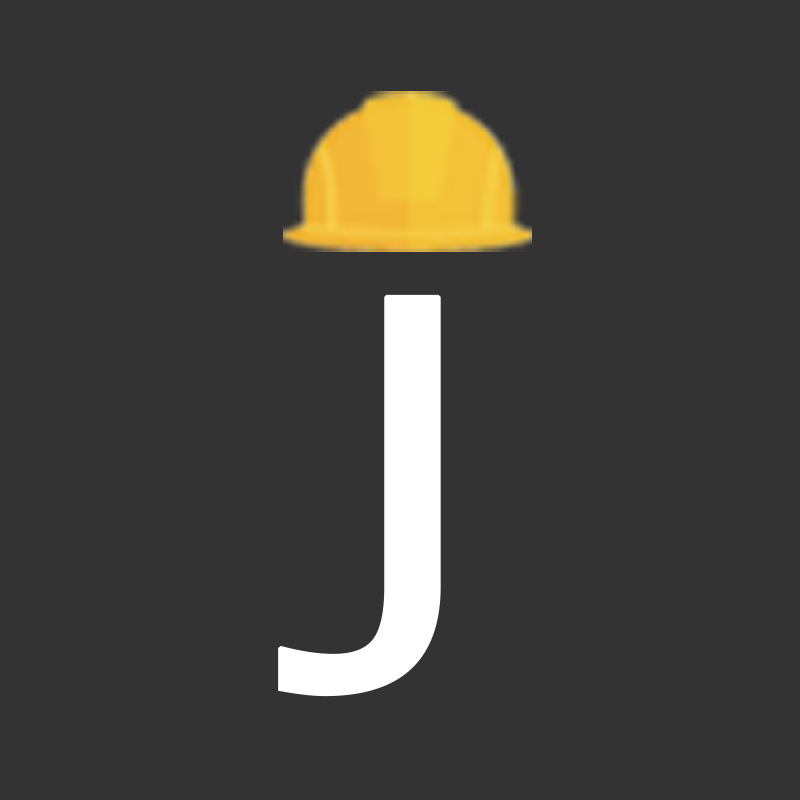
<style>
.page{position:relative;width:800px;height:800px;background:#333333}
.page>*{position:absolute;margin:0}
.t1{font:458.4px "LucidaSansUnicode";letter-spacing:-0.03em;color:#ffffff;font-weight:bold;scale:1.11 1}
</style>
<div class="page">
<p class="t1" style="left:278px;top:294px;width:163px;height:403px">J</p>
</div>
